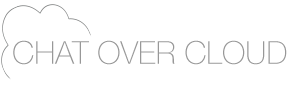
<style>
.page{position:relative;width:300px;height:100px;background:#ffffff}
.page>*{position:absolute;margin:0}
.t1{font:31.4px "HelveticaNeueCE-Thin";color:#989898}
</style>
<div class="page">
<p class="t1" style="left:13px;top:40px;width:274px;height:25px">CHAT OVER CLOUD</p>
</div>
